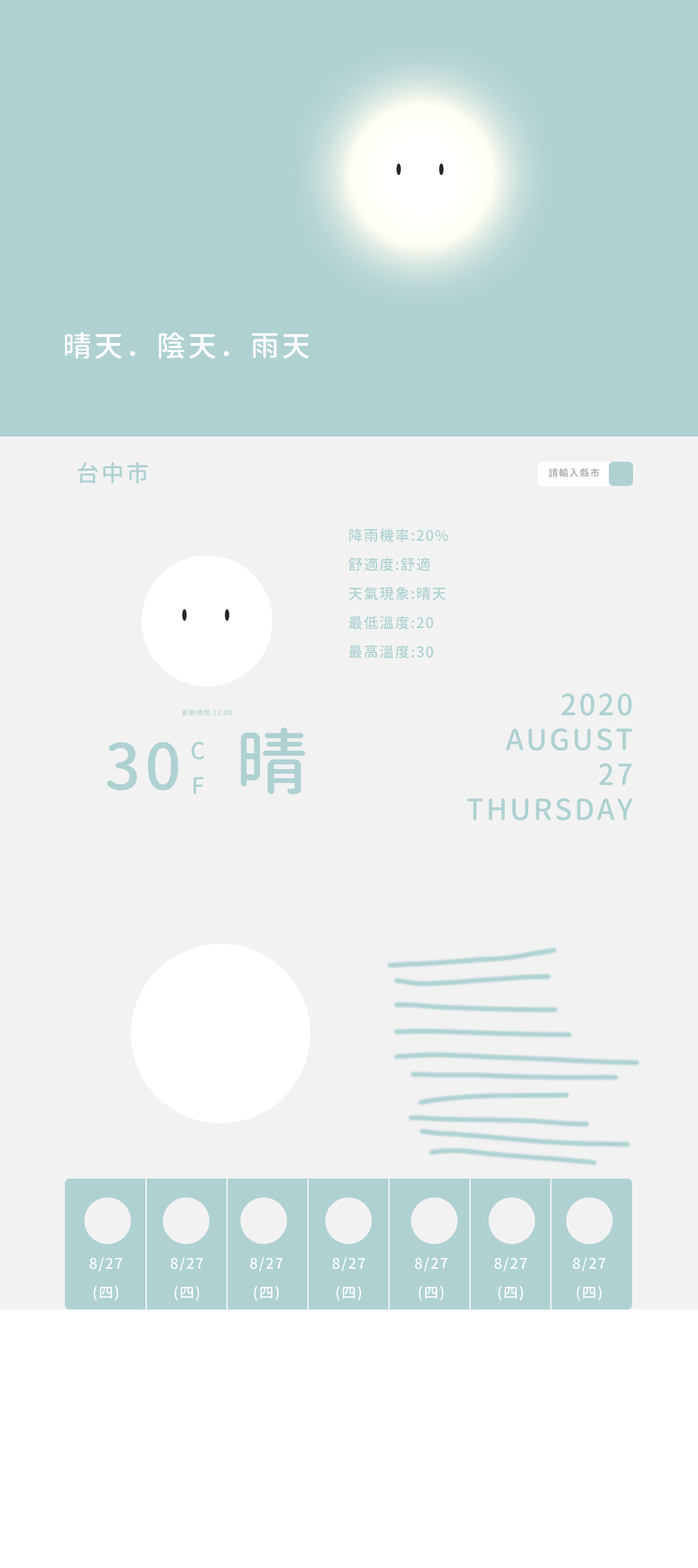
<style>
.page{position:relative;width:698px;height:1568px;background:#f2f2f2}
.page>*{position:absolute;margin:0}
.t1{font:29.1px "GenJyuuGothicX-Medium";letter-spacing:0.075em;color:#ffffff;text-transform:uppercase}
.t2{font:23.3px "GenJyuuGothicX-Medium";letter-spacing:0.075em;color:#afd1d2;text-transform:uppercase}
.t3{font:9.7px "GenJyuuGothicX-Medium";letter-spacing:0.075em;color:#a2a2a2;text-transform:uppercase}
.t4{font:14.5px/29.1px "GenJyuuGothicX-Medium";letter-spacing:0.075em;color:#afd1d2;text-transform:uppercase}
.t5{font:29.1px/34.9px "GenJyuuGothicX-Medium";letter-spacing:0.075em;color:#afd1d2;text-transform:uppercase}
.t6{font:6.8px "GenJyuuGothicX-Medium";letter-spacing:0.075em;color:#afd1d2;text-transform:uppercase}
.t7{font:72.7px "GenJyuuGothicX-Medium";letter-spacing:0.075em;color:#afd1d2;text-transform:uppercase}
.t8{font:63px "GenJyuuGothicX-Medium";letter-spacing:0.075em;color:#afd1d2;text-transform:uppercase}
.t9{font:23.3px/34.9px "GenJyuuGothicX-Medium";letter-spacing:0.075em;color:#afd1d2;text-transform:uppercase}
.t10{font:14.5px/29.1px "GenJyuuGothicX-Medium";letter-spacing:0.075em;color:#fefefe;text-transform:uppercase}
</style>
<div class="page">
<p class="t1" style="left:65px;top:332px;width:244px;height:27px">晴天．陰天．雨天</p>
<p class="t2" style="left:78px;top:462px;width:70px;height:22px">台中市</p>
<p class="t3" style="left:549px;top:468px;width:51px;height:9px">請輸入縣市</p>
<p class="t4" style="left:349px;top:528px;width:99px;height:131px">降雨機率:20%<br>舒適度:舒適<br>天氣現象:晴天<br>最低溫度:20<br>最高溫度:30</p>
<p class="t5" style="left:467px;top:693px;width:166px;height:128px;text-align:right">2020<br>August<br>27<br>Thursday</p>
<p class="t6" style="left:182px;top:709px;width:50px;height:7px">更新時間 12:00</p>
<p class="t7" style="left:241px;top:727px;width:65px;height:67px">晴</p>
<p class="t8" style="left:107px;top:742px;width:71px;height:49px">30</p>
<p class="t9" style="left:192px;top:742px;width:12px;height:52px;text-align:center">C<br>F</p>
<p class="t10" style="left:90px;top:1257px;width:32px;height:44px;text-align:center">8/27<br>(四)</p>
<p class="t10" style="left:171px;top:1257px;width:32px;height:44px;text-align:center">8/27<br>(四)</p>
<p class="t10" style="left:250px;top:1257px;width:33px;height:44px;text-align:center">8/27<br>(四)</p>
<p class="t10" style="left:333px;top:1257px;width:32px;height:44px;text-align:center">8/27<br>(四)</p>
<p class="t10" style="left:415px;top:1257px;width:33px;height:44px;text-align:center">8/27<br>(四)</p>
<p class="t10" style="left:495px;top:1257px;width:32px;height:44px;text-align:center">8/27<br>(四)</p>
<p class="t10" style="left:573px;top:1257px;width:33px;height:44px;text-align:center">8/27<br>(四)</p>
</div>
